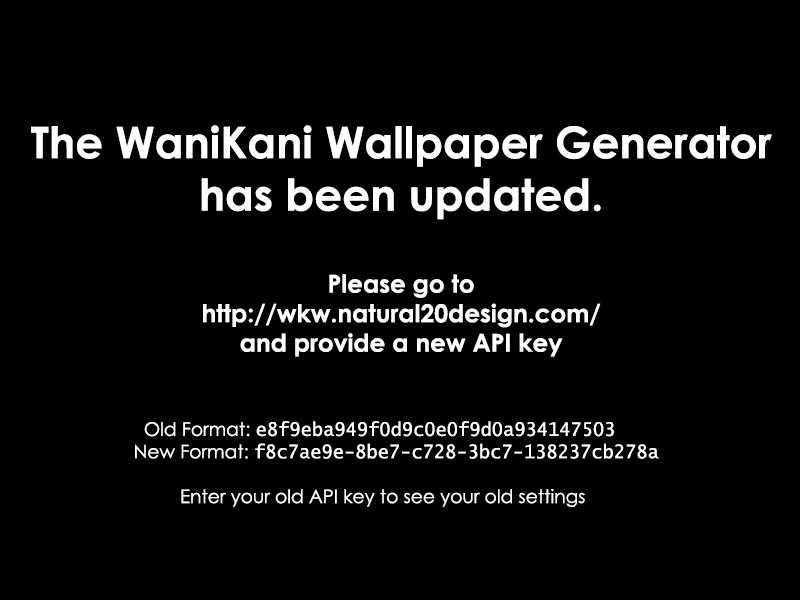
<style>
.page{position:relative;width:800px;height:600px;background:#000000}
.page>*{position:absolute;margin:0}
.t1{font:24.6px "CenturyGothic-Bold";color:#ffffff}
.t2{font:43.7px "CenturyGothic-Bold";color:#ffffff}
.t3{font:18.7px "CenturyGothic";color:#ffffff}
.t4{font:18.7px "LucidaConsole";color:#ffffff}
</style>
<div class="page">
<p class="t1" style="left:31px;top:125px;width:741px;height:232px;text-align:center"><span class="t2">The WaniKani Wallpaper Generator<br>has been updated.<br><br></span>Please go to<br>http://wkw.natural20design.com/<br>and provide a new API key</p>
<p class="t3" style="left:135px;top:421px;width:524px;height:86px">Old Format: <span class="t4">e8f9eba949f0d9c0e0f9d0a934147503<br></span>New Format: <span class="t4">f8c7ae9e-8be7-c728-3bc7-138237cb278a<br><br></span>         Enter your old API key to see your old settings</p>
</div>
